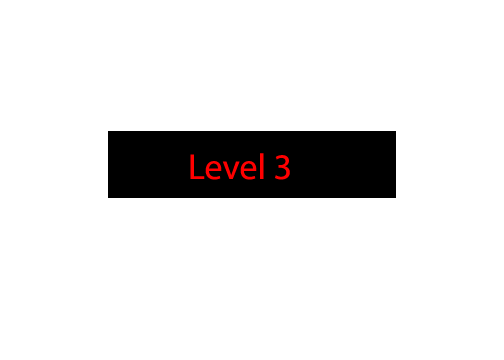
<style>
.page{position:relative;width:504px;height:360px;background:#ffffff}
.page>*{position:absolute;margin:0}
.t1{font:36px "MyriadPro-Regular";color:#ff0000}
</style>
<div class="page">
<p class="t1" style="left:190px;top:153px;width:100px;height:27px">Level 3</p>
</div>
